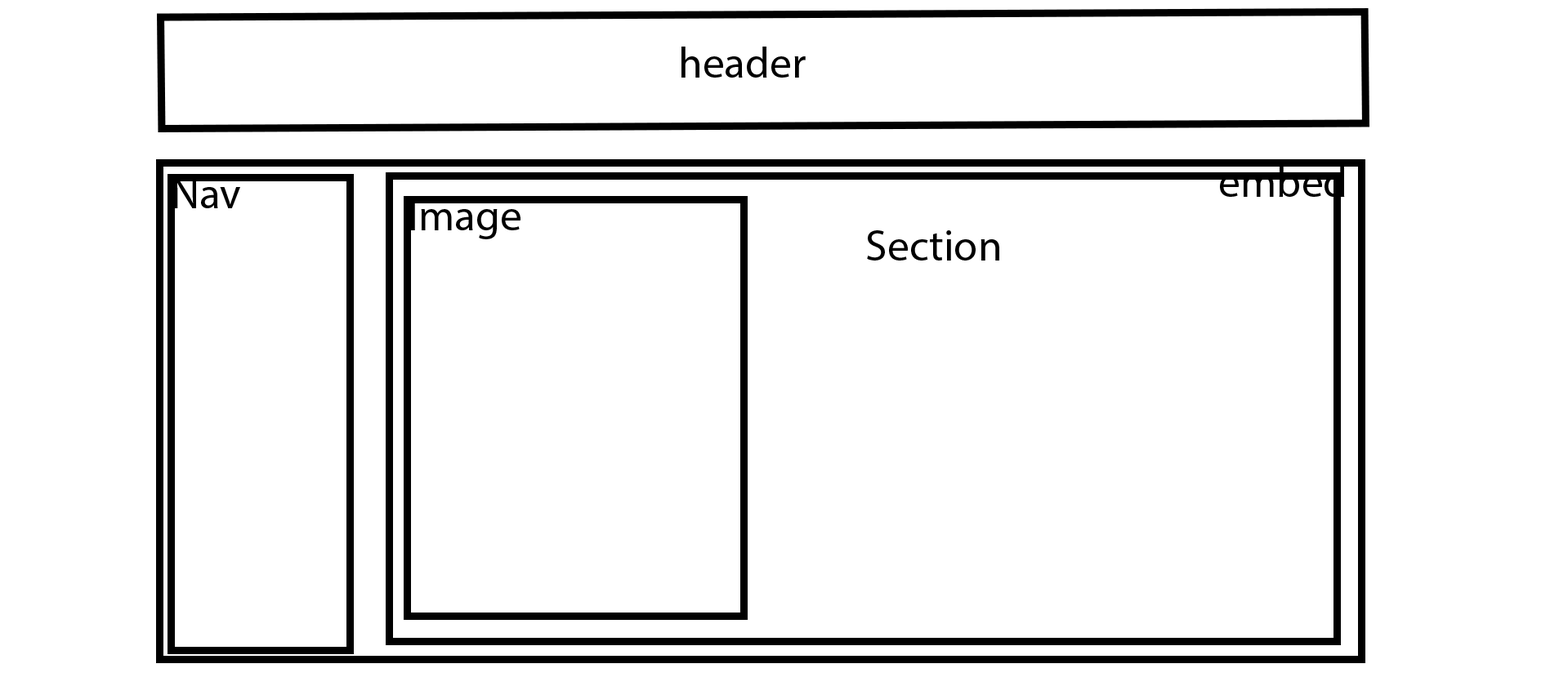
<style>
.page{position:relative;width:1568px;height:695px;background:#ffffff}
.page>*{position:absolute;margin:0}
.t1{font:43.6px "MyriadPro-Regular";color:#000000}
</style>
<div class="page">
<p class="t1" style="left:681px;top:47px;width:125px;height:31px">header</p>
<p class="t1" style="left:1220px;top:166px;width:125px;height:31px">embed</p>
<p class="t1" style="left:174px;top:178px;width:66px;height:30px">Nav</p>
<p class="t1" style="left:411px;top:200px;width:109px;height:39px">Image</p>
<p class="t1" style="left:867px;top:230px;width:132px;height:31px">Section</p>
</div>
